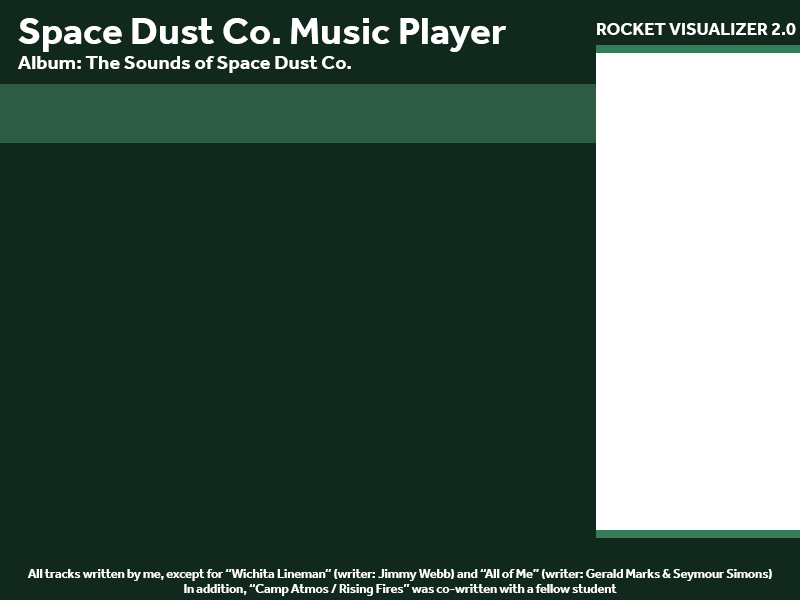
<style>
.page{position:relative;width:800px;height:600px;background:#11281c}
.page>*{position:absolute;margin:0}
.t1{font:39.2px "Effra-Bold";color:#ffffff}
.t2{font:17.9px "Effra-Bold";color:#ffffff}
.t3{font:20.1px "Effra-Bold";color:#ffffff}
.t4{font:12.6px "Effra-Bold";color:#ffffff}
</style>
<div class="page">
<p class="t1" style="left:18px;top:18px;width:488px;height:34px">Space Dust Co. Music Player</p>
<p class="t2" style="left:597px;top:23px;width:199px;height:12px">ROCKET VISUALIZER 2.0</p>
<p class="t3" style="left:18px;top:56px;width:333px;height:17px">Album: The Sounds of Space Dust Co.</p>
<p class="t4" style="left:27px;top:569px;width:745px;height:27px;text-align:center">All tracks written by me, except for “Wichita Lineman” (writer: Jimmy Webb) and “All of Me” (writer: Gerald Marks &amp; Seymour Simons)<br>In addition, “Camp Atmos / Rising Fires” was co-written with a fellow student</p>
</div>
